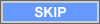
<style>
.page{position:relative;width:100px;height:24px;background:#6699ff}
.page>*{position:absolute;margin:0}
.t1{font:14px "Arial-BoldMT";color:#ffffff}
</style>
<div class="page">
<p class="t1" style="left:34px;top:6px;width:32px;height:12px">SKIP</p>
</div>
